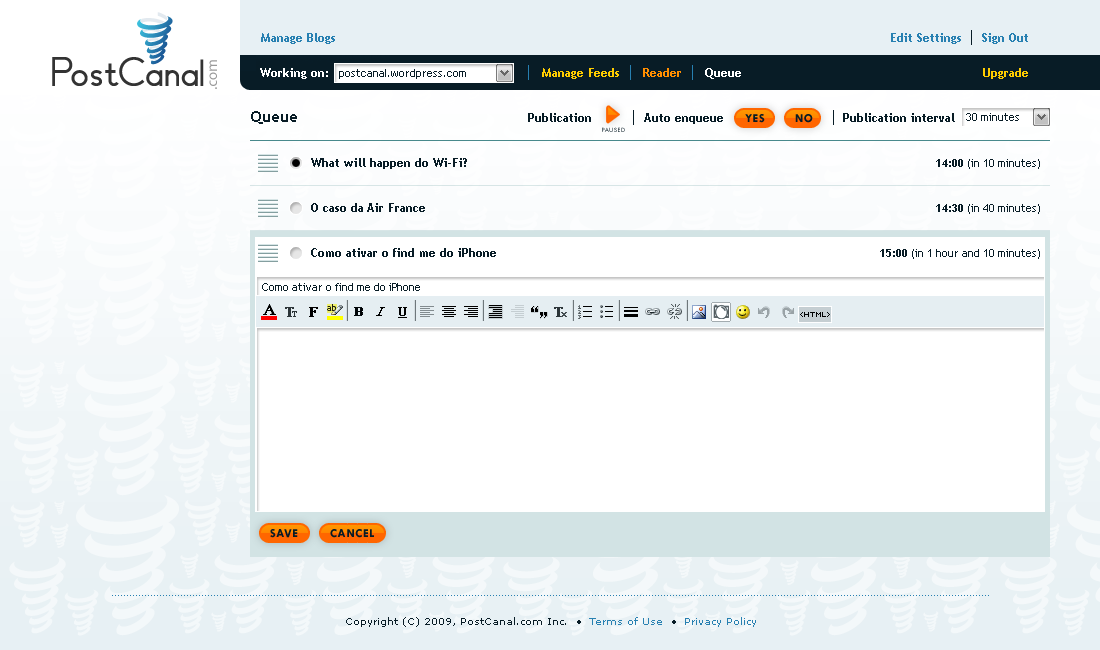
<style>
.page{position:relative;width:1100px;height:650px;background:#ffffff}
.page>*{position:absolute;margin:0}
.t1{font:12px "TrebuchetMS-Bold";color:#2780b1}
.t2{font:12px "TrebuchetMS-Bold";color:#ffffff}
.t3{font:11px "TrebuchetMS";color:#081c26}
.t4{font:12px "TrebuchetMS-Bold";color:#ffcc00}
.t5{font:12px "TrebuchetMS-Bold";color:#ff8e00}
.t6{font:16px "TrebuchetMS-Bold";color:#081c26}
.t7{font:12px "TrebuchetMS-Bold";color:#081c26}
.t8{font:12px "TwCenMT-Bold";letter-spacing:0.05em;color:#081c26;text-transform:uppercase}
.t9{font:7px "TwCenMT-Regular";letter-spacing:0.05em;text-transform:uppercase}
.t10{font:11px "TrebuchetMS-Bold";color:#081c26}
.t11{font:10px "Verdana";color:#081c26}
.t12{font:10px "Verdana";color:#2780b1}
</style>
<div class="page">
<p class="t1" style="left:261px;top:33px;width:74px;height:11px">Manage Blogs</p>
<p class="t1" style="left:891px;top:33px;width:70px;height:11px">Edit Settings</p>
<p class="t1" style="left:982px;top:33px;width:46px;height:11px">Sign Out</p>
<p class="t2" style="left:260px;top:68px;width:68px;height:11px">Working on:</p>
<p class="t3" style="left:339px;top:69px;width:127px;height:10px">postcanal.wordpress.com</p>
<p class="t4" style="left:542px;top:68px;width:77px;height:11px">Manage Feeds</p>
<p class="t5" style="left:643px;top:68px;width:38px;height:9px">Reader</p>
<p class="t2" style="left:705px;top:68px;width:36px;height:11px">Queue</p>
<p class="t4" style="left:983px;top:68px;width:45px;height:11px">Upgrade</p>
<p class="t6" style="left:251px;top:111px;width:46px;height:13px">Queue</p>
<p class="t7" style="left:528px;top:113px;width:63px;height:9px">Publication</p>
<p class="t7" style="left:644px;top:113px;width:79px;height:11px">Auto enqueue</p>
<p class="t7" style="left:843px;top:113px;width:112px;height:9px">Publication interval</p>
<p class="t3" style="left:966px;top:113px;width:53px;height:8px">30 minutes</p>
<p class="t8" style="left:745px;top:114px;width:20px;height:9px">YES</p>
<p class="t8" style="left:795px;top:114px;width:18px;height:9px">NO</p>
<p class="t9" style="left:602px;top:127px;width:23px;height:5px">paused</p>
<p class="t7" style="left:311px;top:158px;width:156px;height:11px">What will happen do Wi-Fi?</p>
<p class="t3" style="left:936px;top:159px;width:104px;height:10px"><span class="t10">14:00</span> (in 10 minutes)</p>
<p class="t7" style="left:311px;top:203px;width:114px;height:9px">O caso da Air France</p>
<p class="t3" style="left:936px;top:204px;width:104px;height:10px"><span class="t10">14:30</span> (in 40 minutes)</p>
<p class="t7" style="left:311px;top:248px;width:185px;height:9px">Como ativar o find me do iPhone</p>
<p class="t3" style="left:880px;top:249px;width:160px;height:10px"><span class="t10">15:00</span> (in 1 hour and 10 minutes)</p>
<p class="t3" style="left:262px;top:283px;width:158px;height:8px">Como ativar o find me do iPhone</p>
<p class="t8" style="left:270px;top:529px;width:28px;height:9px">save</p>
<p class="t8" style="left:330px;top:529px;width:44px;height:9px">CANCEL</p>
<p class="t11" style="left:346px;top:617px;width:410px;height:10px">Copyright (C) 2009, PostCanal.com Inc.  • <span class="t12"> Terms of Use</span>  •  <span class="t12">Privacy Policy</span></p>
</div>
